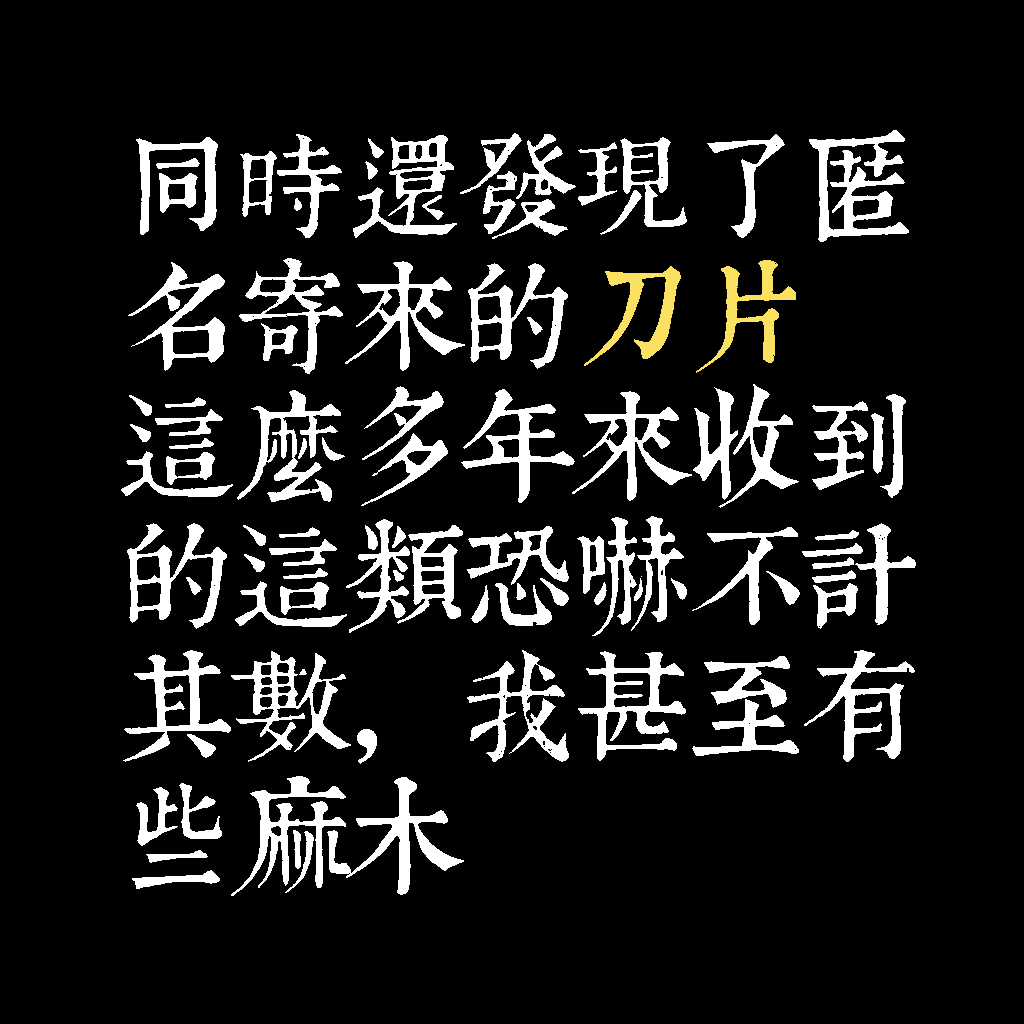
<style>
.page{position:relative;width:1024px;height:1024px;background:#000000}
.page>*{position:absolute;margin:0}
.t1{font:116px/130px "TpldKhangXiDictTrial";letter-spacing:-0.02em;color:#ffffff}
.t2{font:116px/130px "TpldKhangXiDictTrial";letter-spacing:-0.02em;color:#fbe161}
</style>
<div class="page">
<p class="t1" style="left:121px;top:130px;width:795px;height:766px">同時還發現了匿<br>名寄來的<span class="t2">刀片</span><br>這麼多年來收到<br>的這類恐嚇不計<br>其數，我甚至有<br>些麻木</p>
</div>
